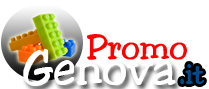
<style>
.page{position:relative;width:209px;height:89px;background:#ffffff}
.page>*{position:absolute;margin:0}
.t1{font:36px "Jester-Regular";color:#ff0000}
.t2{font:48px "Jester-Regular";color:#ffffff}
.t3{font:30px "Jester-Regular";color:#004c8c}
</style>
<div class="page">
<p class="t1" style="left:87px;top:34px;width:100px;height:26px">Promo</p>
<p class="t2" style="left:23px;top:48px;width:153px;height:38px">Genova</p>
<p class="t3" style="left:180px;top:64px;width:24px;height:20px">.it</p>
</div>
